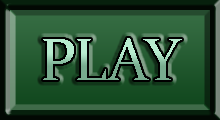
<style>
.page{position:relative;width:220px;height:120px}
.page>*{position:absolute;margin:0}
.t1{font:60px "Constantia"}
</style>
<div class="page">
<p class="t1" style="left:43px;top:38px;width:139px;height:42px">PLAY</p>
</div>
